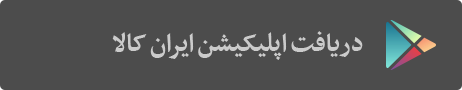
<style>
.page{position:relative;width:462px;height:90px;background:#4c4c4c}
.page>*{position:absolute;margin:0}
.t1{font:30px "BBCNassim-Bold";letter-spacing:-0.015em;color:#cccccc}
</style>
<div class="page">
<p class="t1" style="left:112px;top:31px;width:251px;height:29px">دریافت اپلیکیشن ایران کالا</p>
</div>
